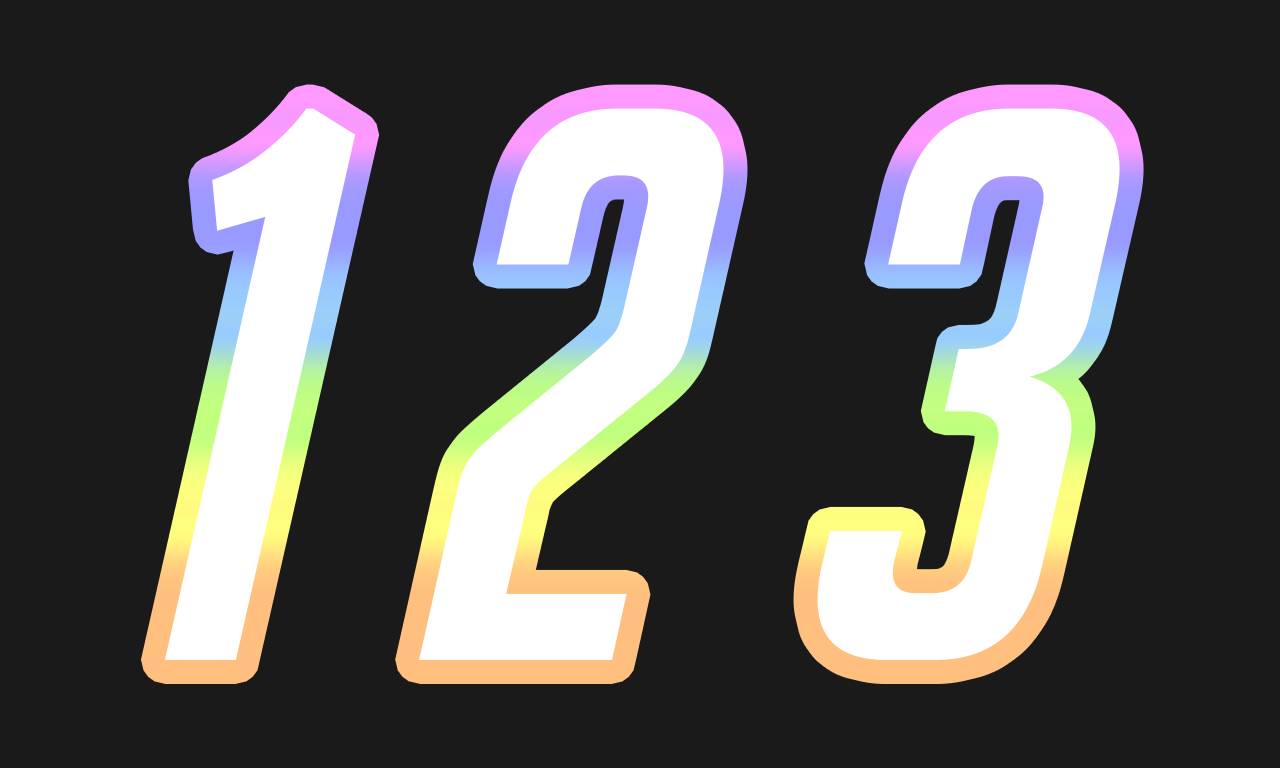
<style>
.page{position:relative;width:1280px;height:768px;background:#1a1a1a}
.page>*{position:absolute;margin:0}
.t1{font:768px "BigNoodleTitling-Oblique";letter-spacing:0.2em;color:#ffffff;font-style:italic}
.t2{font:767.7px "BigNoodleTitling-Oblique";letter-spacing:0.2em;color:#ffffff;font-style:italic}
</style>
<div class="page">
<p class="t1" style="left:164px;top:108px;width:192px;height:552px">1</p>
<p class="t2" style="left:164px;top:108px;width:192px;height:552px">1</p>
<p class="t1" style="left:419px;top:108px;width:305px;height:552px">2</p>
<p class="t2" style="left:419px;top:108px;width:305px;height:552px">2</p>
<p class="t1" style="left:817px;top:108px;width:303px;height:552px">3</p>
<p class="t2" style="left:817px;top:108px;width:303px;height:552px">3</p>
</div>
